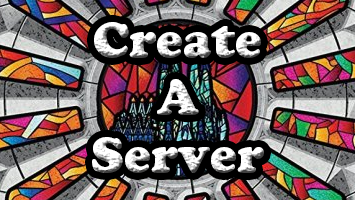
<style>
.page{position:relative;width:355px;height:200px}
.page>*{position:absolute;margin:0}
.t1{font:48px "CooperBlackStd"}
</style>
<div class="page">
<p class="t1" style="left:92px;top:22px;width:172px;height:151px;text-align:center">Create<br>A<br>Server</p>
</div>
